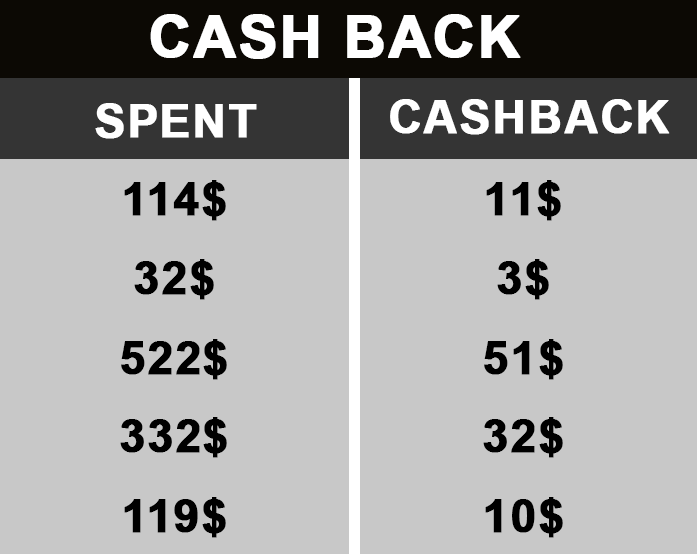
<style>
.page{position:relative;width:697px;height:554px;background:#c8c8c8}
.page>*{position:absolute;margin:0}
.t1{font:58.2px "Arial-BoldMT";letter-spacing:0.02em;color:#ffffff;font-weight:bold}
.t2{font:46.5px "Arial-BoldMT";letter-spacing:0.02em;color:#ffffff;font-weight:bold}
.t3{font:46px "Arial-BoldMT";letter-spacing:0.02em;color:#ffffff;font-weight:bold}
.t4{font:46px "Arial-BoldMT";letter-spacing:0.02em;color:#000000;font-weight:bold}
</style>
<div class="page">
<p class="t1" style="left:150px;top:14px;width:371px;height:45px">CASH BACK</p>
<p class="t2" style="left:390px;top:99px;width:280px;height:36px">CASHBACK</p>
<p class="t3" style="left:95px;top:103px;width:162px;height:36px">SPENT</p>
<p class="t4" style="left:124px;top:180px;width:102px;height:41px">114$</p>
<p class="t4" style="left:486px;top:180px;width:75px;height:41px">11$</p>
<p class="t4" style="left:134px;top:259px;width:80px;height:41px">32$</p>
<p class="t4" style="left:497px;top:259px;width:52px;height:41px">3$</p>
<p class="t4" style="left:121px;top:339px;width:106px;height:41px">522$</p>
<p class="t4" style="left:484px;top:339px;width:79px;height:41px">51$</p>
<p class="t4" style="left:120px;top:417px;width:107px;height:41px">332$</p>
<p class="t4" style="left:483px;top:417px;width:80px;height:41px">32$</p>
<p class="t4" style="left:124px;top:497px;width:102px;height:41px">119$</p>
<p class="t4" style="left:485px;top:497px;width:78px;height:41px">10$</p>
</div>
